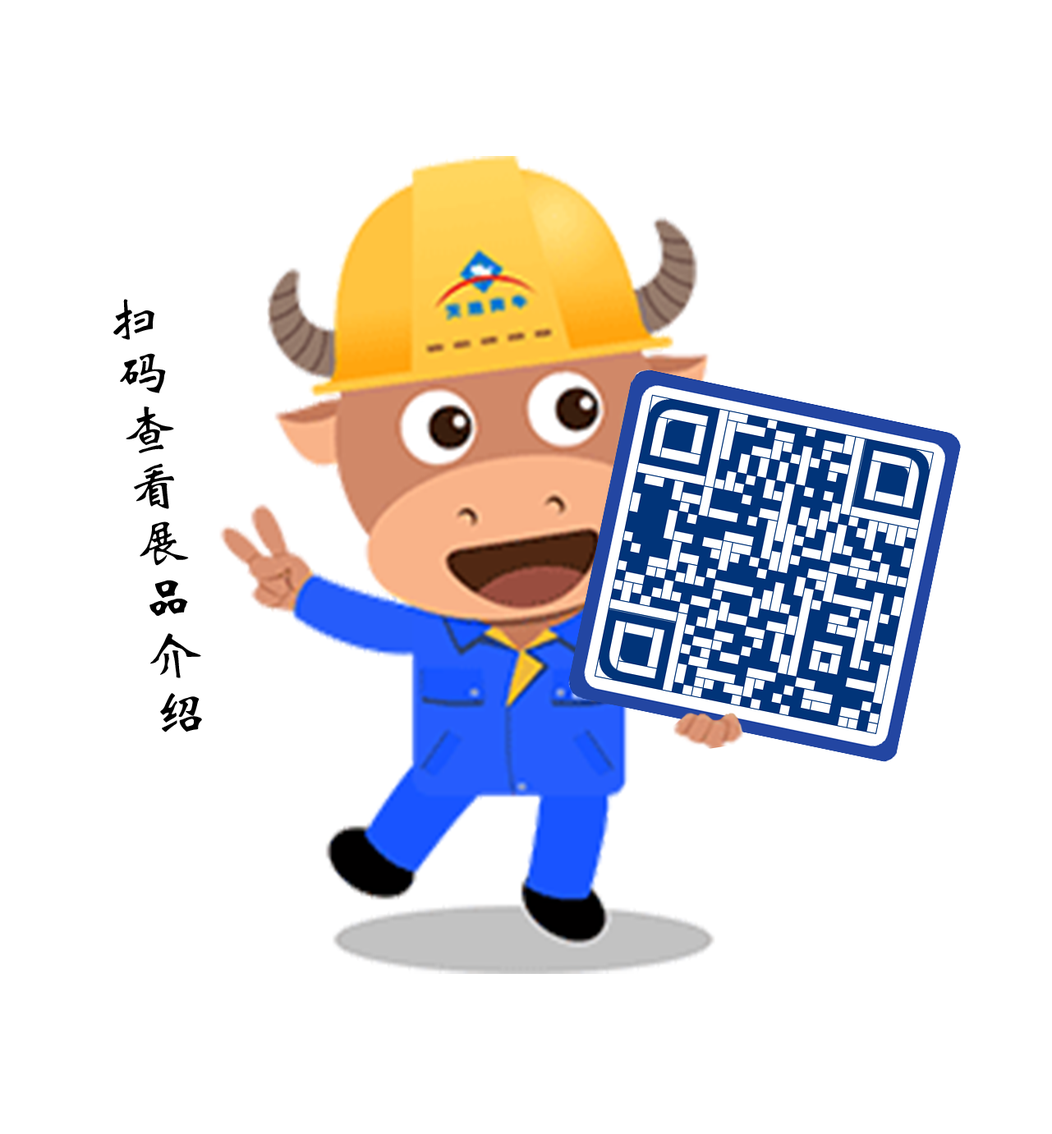
<style>
.page{position:relative;width:1052px;height:1134px;background:#ffffff}
.page>*{position:absolute;margin:0}
.t1{font:54.7px "STXinwei";color:#000000}
</style>
<div class="page">
<p class="t1" style="left:113px;top:299px;width:89px;height:433px;rotate:-7deg">扫码查看展品介绍</p>
</div>
